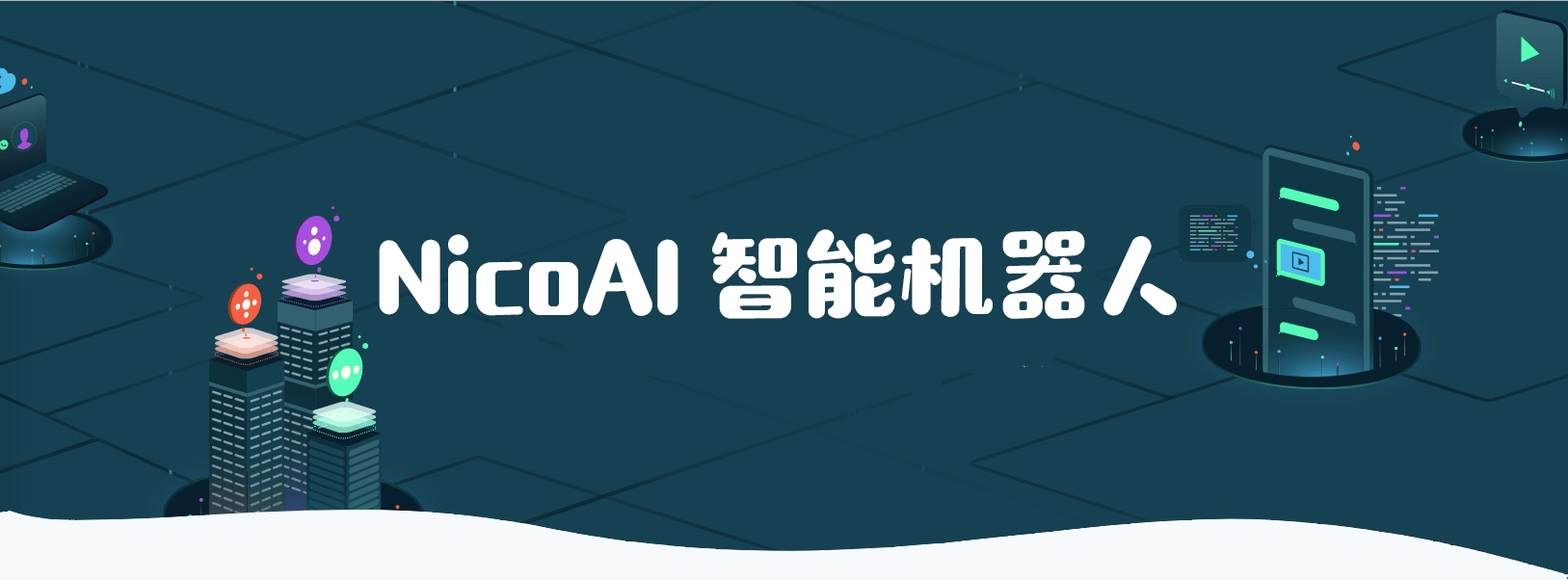
<style>
.page{position:relative;width:1568px;height:580px;background:#164152}
.page>*{position:absolute;margin:0}
.t1{font:96.4px "MF-SuBai(Noncommercial)-Regular";color:#ffffff}
</style>
<div class="page">
<p class="t1" style="left:379px;top:229px;width:798px;height:90px">NicoAI 智能机器人</p>
</div>
